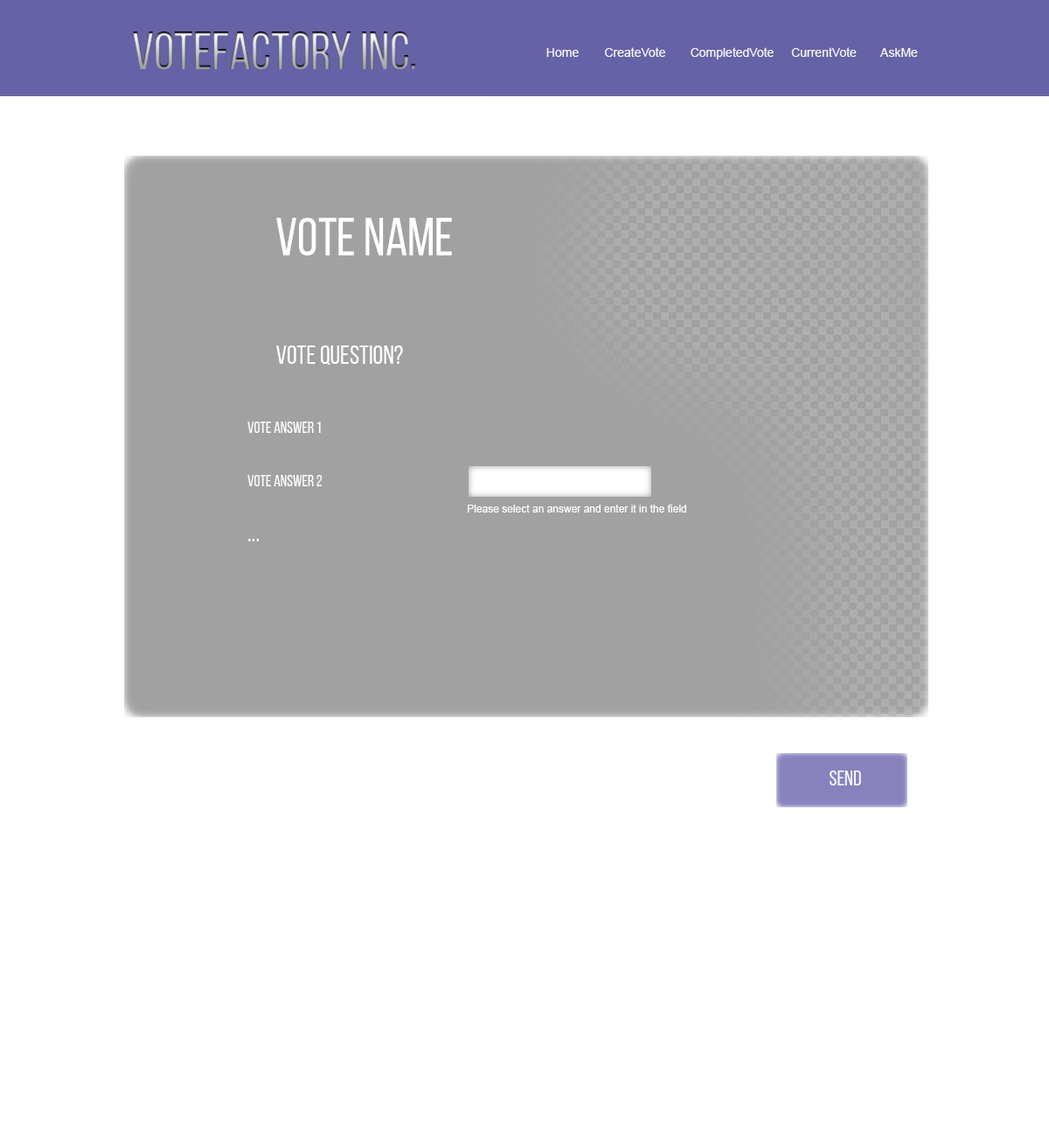
<style>
.page{position:relative;width:1049px;height:1137px;background:#ffffff}
.page>*{position:absolute;margin:0}
.t1{font:52.5px "BebasNeueRegular"}
.t2{font:12.2px "ArialMT";color:#f8f7fa}
.t3{font:52.5px "BebasNeueRegular";color:#ffffff}
.t4{font:26.2px "BebasNeueRegular";color:#ffffff}
.t5{font:15.7px "BebasNeueRegular";color:#ffffff}
.t6{font:10.5px "ArialMT";color:#ffffff}
.t7{font:21px "BebasNeueRegular";color:#f8f7fa}
</style>
<div class="page">
<p class="t1" style="left:133px;top:31px;width:282px;height:38px">Votefactory inc.</p>
<p class="t2" style="left:546px;top:48px;width:33px;height:9px">Home</p>
<p class="t2" style="left:605px;top:47px;width:60px;height:10px">CreateVote</p>
<p class="t2" style="left:691px;top:47px;width:83px;height:12px">CompletedVote</p>
<p class="t2" style="left:791px;top:47px;width:66px;height:10px">CurrentVote</p>
<p class="t2" style="left:880px;top:48px;width:38px;height:9px">AskMe</p>
<p class="t3" style="left:276px;top:218px;width:176px;height:37px">Vote name</p>
<p class="t4" style="left:276px;top:345px;width:127px;height:20px">Vote question?</p>
<p class="t5" style="left:247px;top:421px;width:74px;height:12px">Vote answer 1</p>
<p class="t5" style="left:247px;top:475px;width:76px;height:11px">vote answer 2</p>
<p class="t6" style="left:468px;top:504px;width:218px;height:8px">Please select an answer and enter it in the field</p>
<p class="t4" style="left:248px;top:539px;width:11px;height:2px">...</p>
<p class="t7" style="left:830px;top:770px;width:31px;height:15px">send</p>
</div>
